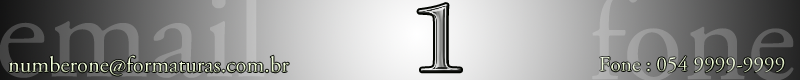
<style>
.page{position:relative;width:800px;height:80px}
.page>*{position:absolute;margin:0}
.t1{font:22.6px "AGaramondPro-Regular"}
.t2{font:21.2px "AGaramondPro-Regular"}
</style>
<div class="page">
<p class="t1" style="left:8px;top:55px;width:281px;height:21px">numberone@formaturas.com.br</p>
<p class="t2" style="left:600px;top:56px;width:185px;height:17px">Fone : 054 9999-9999</p>
</div>
